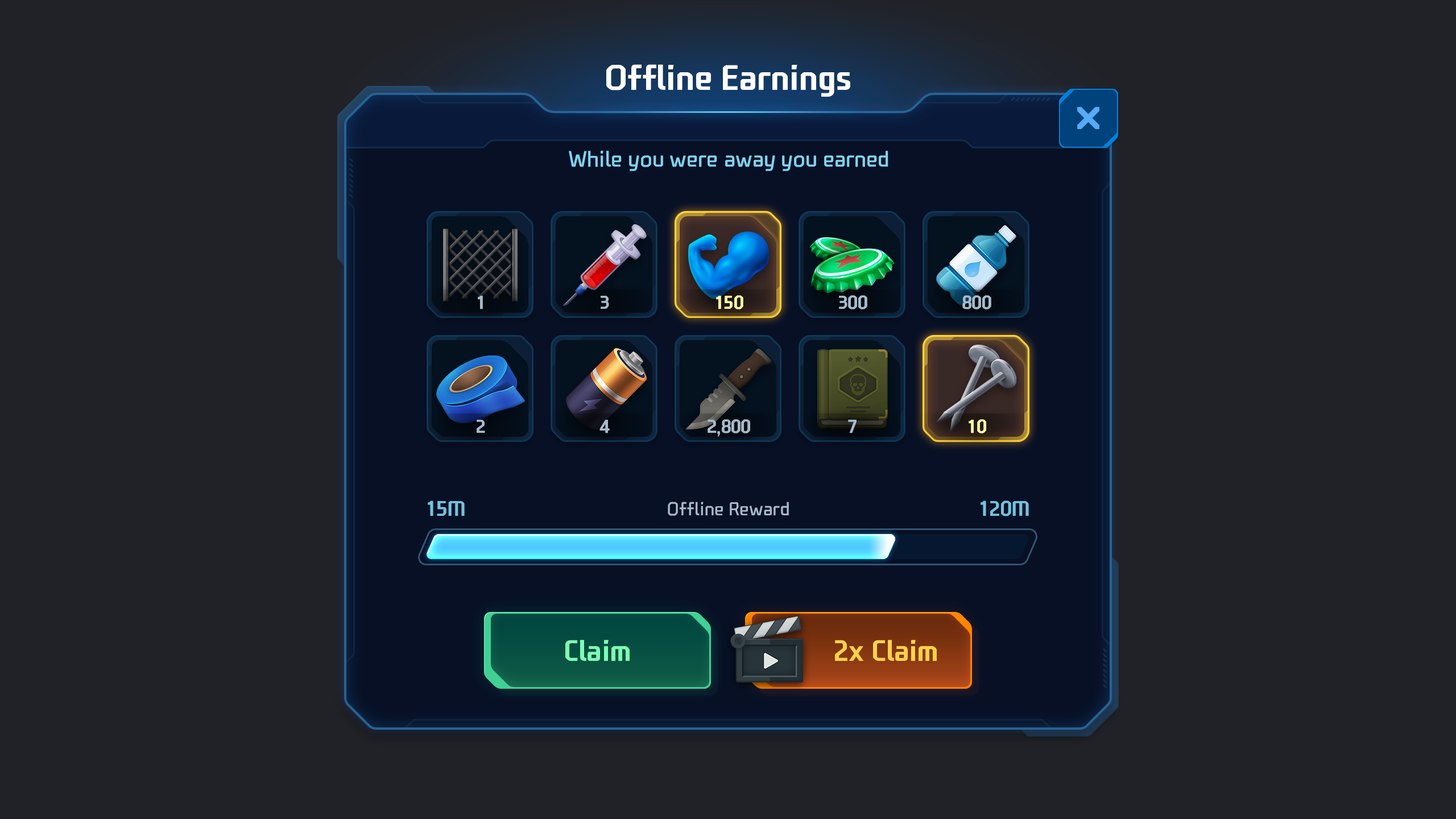
<style>
.page{position:relative;width:1456px;height:819px;background:#212227}
.page>*{position:absolute;margin:0}
.t1{font:34.1px "NEXONFootballGothicB";color:#ffffff}
.t2{font:21.6px "NEXONFootballGothicL";color:#7fd4f0}
.t3{font:17.9px "NEXONFootballGothicB";color:#a7bbca;text-transform:uppercase}
.t4{font:17.9px "NEXONFootballGothicB";color:#faffa3;text-transform:uppercase}
.t5{font:20.5px "NEXONFootballGothicB";color:#74c2de}
.t6{font:18.2px "NEXONFootballGothicL";color:#a7bbca}
.t7{font:28.4px "NEXONFootballGothicB";color:#7effb1}
.t8{font:28.4px "NEXONFootballGothicB";color:#ffd24a}
</style>
<div class="page">
<p class="t1" style="left:606px;top:64px;width:244px;height:33px">Offline Earnings</p>
<p class="t2" style="left:569px;top:151px;width:319px;height:20px">While you were away you earned</p>
<p class="t3" style="left:478px;top:296px;width:5px;height:13px">1</p>
<p class="t3" style="left:601px;top:296px;width:8px;height:13px">3</p>
<p class="t4" style="left:716px;top:295px;width:27px;height:14px">150</p>
<p class="t3" style="left:839px;top:295px;width:28px;height:14px">300</p>
<p class="t3" style="left:962px;top:295px;width:29px;height:14px">800</p>
<p class="t3" style="left:477px;top:420px;width:8px;height:13px">2</p>
<p class="t3" style="left:599px;top:420px;width:11px;height:13px">4</p>
<p class="t3" style="left:708px;top:419px;width:42px;height:18px">2,800</p>
<p class="t3" style="left:848px;top:420px;width:9px;height:13px">7</p>
<p class="t4" style="left:969px;top:419px;width:17px;height:14px">10</p>
<p class="t5" style="left:428px;top:500px;width:37px;height:16px">15M</p>
<p class="t6" style="left:668px;top:502px;width:121px;height:14px">Offline Reward</p>
<p class="t5" style="left:981px;top:500px;width:48px;height:16px">120M</p>
<p class="t7" style="left:565px;top:640px;width:65px;height:21px">Claim</p>
<p class="t8" style="left:835px;top:640px;width:102px;height:21px">2x Claim</p>
</div>
